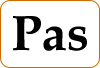
<style>
.page{position:relative;width:100px;height:68px;background:#ffffff}
.page>*{position:absolute;margin:0}
.t1{font:50px "BookAntiqua-Bold";color:#000000}
</style>
<div class="page">
<p class="t1" style="left:13px;top:16px;width:74px;height:35px">Pas</p>
</div>
